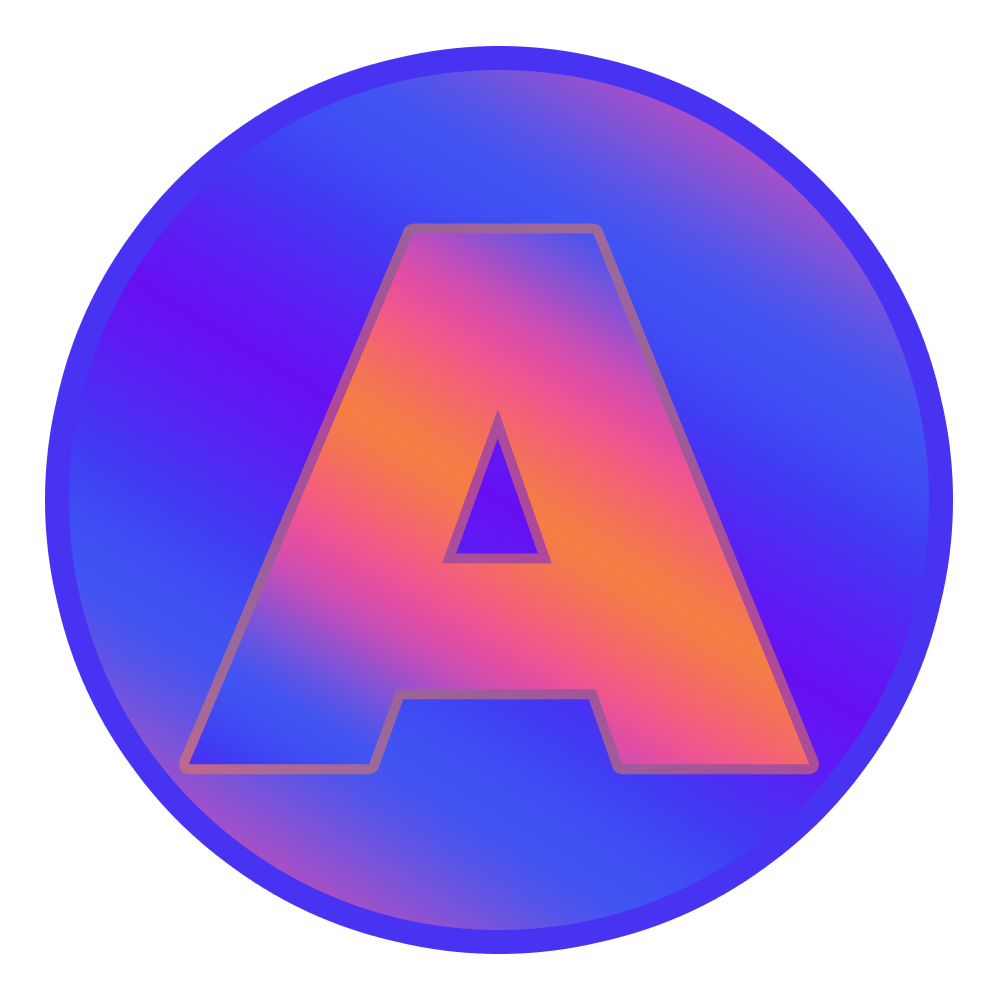
<style>
.page{position:relative;width:1000px;height:1000px;background:#ffffff}
.page>*{position:absolute;margin:0}
.t1{font:756.6px "Alexandria-Black";letter-spacing:-0.04em}
</style>
<div class="page">
<p class="t1" style="left:188px;top:233px;width:622px;height:532px">A</p>
</div>
